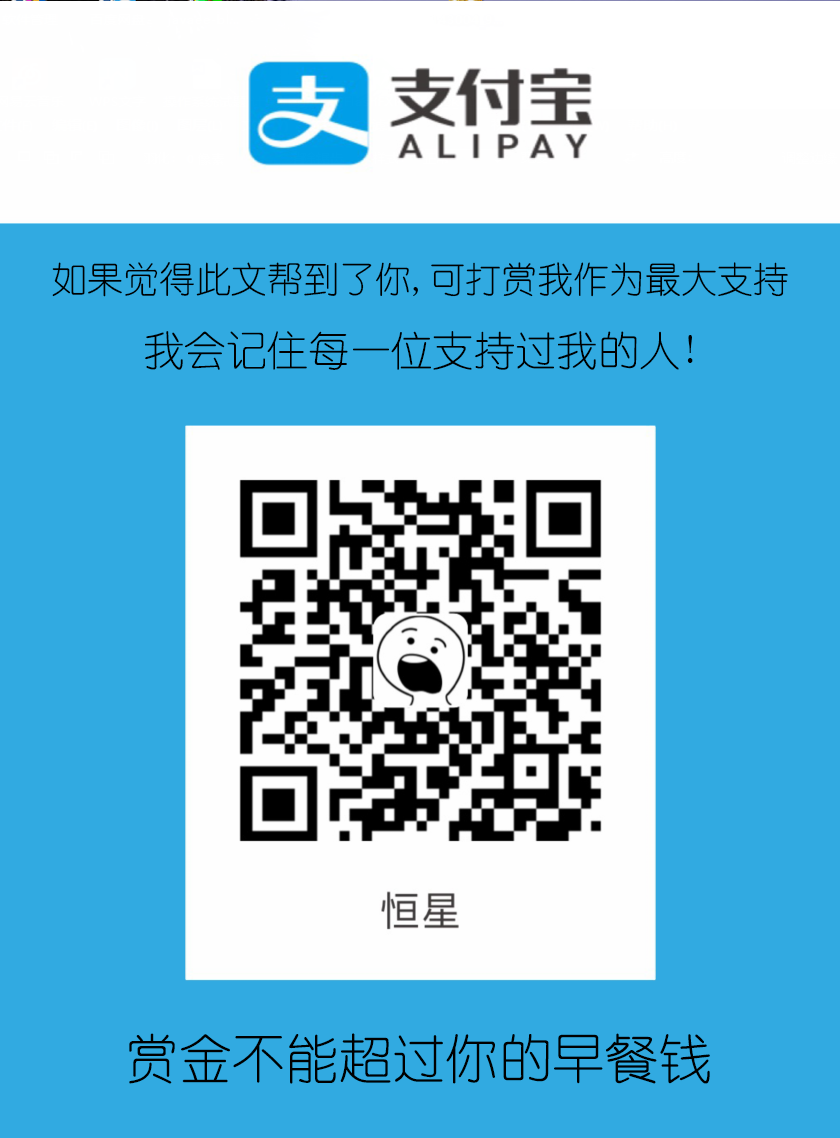
<style>
.page{position:relative;width:840px;height:1138px;background:#31aae1}
.page>*{position:absolute;margin:0}
.t1{font:36px "YouYuan";color:#000000}
.t2{font:41.3px "YouYuan";color:#000000}
.t3{font:53.3px "YouYuan";color:#000000}
</style>
<div class="page">
<p class="t1" style="left:52px;top:262px;width:736px;height:35px">如果觉得此文帮到了你,可打赏我作为最大支持</p>
<p class="t2" style="left:145px;top:331px;width:548px;height:39px">我会记住每一位支持过我的人!</p>
<p class="t3" style="left:129px;top:1033px;width:581px;height:51px">赏金不能超过你的早餐钱</p>
</div>
